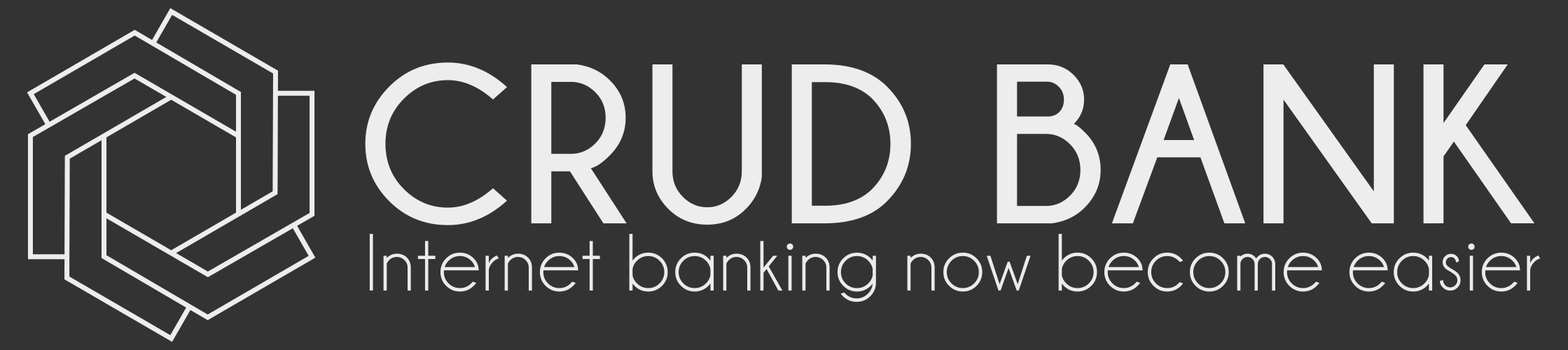
<style>
.page{position:relative;width:1568px;height:350px;background:#333333}
.page>*{position:absolute;margin:0}
.t1{font:226px "Champagne&Limousines-Bold";letter-spacing:0.025em;color:#ededed}
.t2{font:81.7px "Champagne&Limousines";letter-spacing:0.025em;color:#ebebeb}
</style>
<div class="page">
<p class="t1" style="left:365px;top:62px;width:1170px;height:164px">CRUD BANK</p>
<p class="t2" style="left:369px;top:234px;width:1172px;height:69px">Internet banking now become easier</p>
</div>
